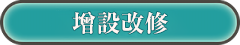
<style>
.page{position:relative;width:240px;height:45px}
.page>*{position:absolute;margin:0}
.t1{font:24px "RyuminPr6N-ExBold";color:#fff6f2}
</style>
<div class="page">
<p class="t1" style="left:72px;top:11px;width:96px;height:23px">增設改修</p>
</div>
